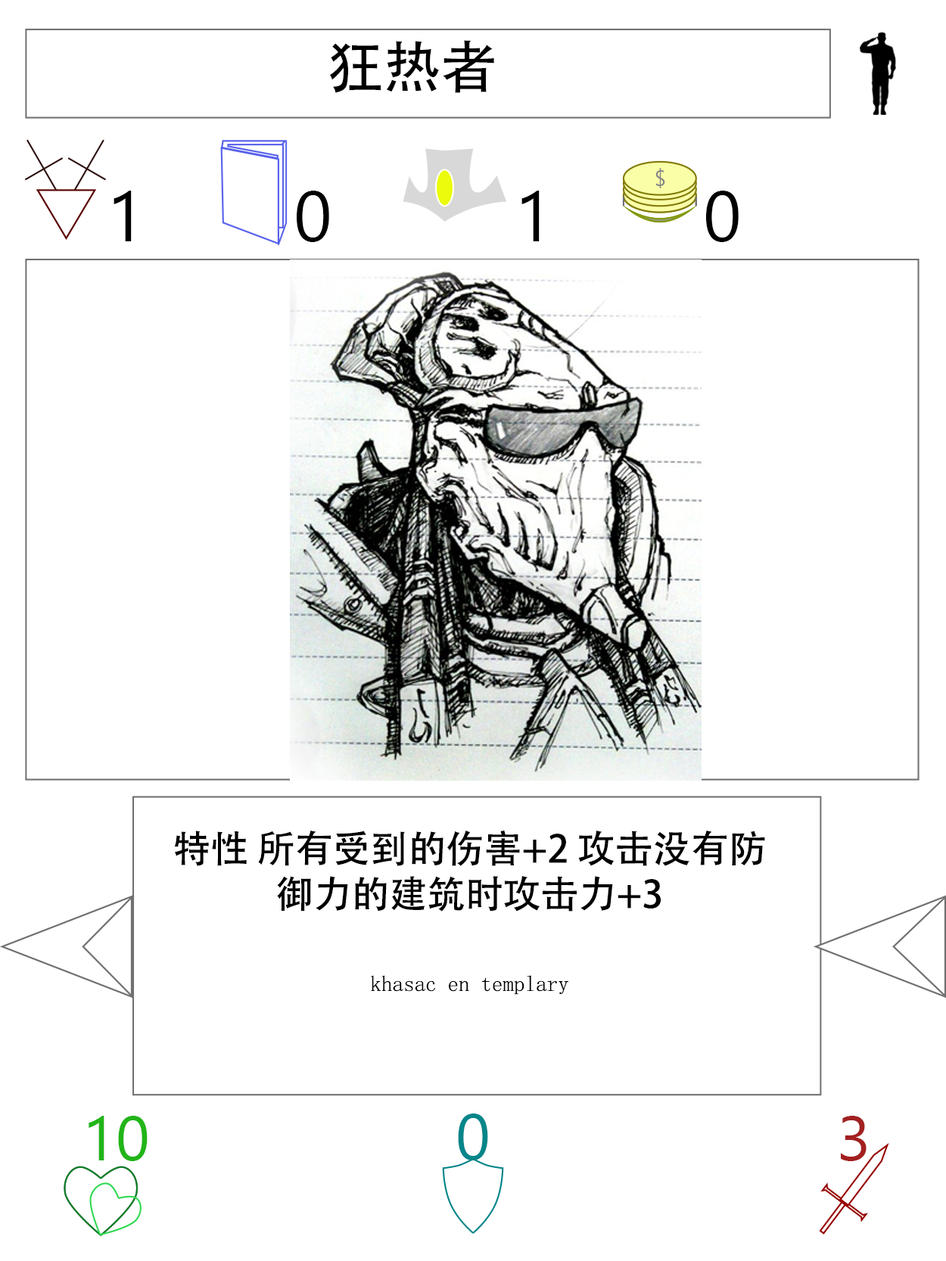
<style>
.page{position:relative;width:946px;height:1261px;background:#ffffff}
.page>*{position:absolute;margin:0}
.t1{font:56.7px "AdobeHeitiStd-Regular";color:#000000}
.t2{font:70.9px "SegoeUI";color:#000000}
.t3{font:37.8px "AdobeHeitiStd-Regular";color:#000000}
.t4{font:22.1px "NSimSun";color:#000000}
.t5{font:63px "SegoeUI";color:#22b518}
.t6{font:64.6px "SegoeUI";color:#05868a}
.t7{font:63px "SegoeUI";color:#a32020}
</style>
<div class="page">
<p class="t1" style="left:330px;top:40px;width:164px;height:53px">狂热者</p>
<p class="t2" style="left:113px;top:191px;width:19px;height:50px">1</p>
<p class="t2" style="left:297px;top:191px;width:32px;height:51px">0</p>
<p class="t2" style="left:521px;top:191px;width:18px;height:50px">1</p>
<p class="t2" style="left:706px;top:191px;width:32px;height:51px">0</p>
<p class="t3" style="left:174px;top:831px;width:591px;height:164px;text-align:center">特性 所有受到的伤害+2 攻击没有防御力的建筑时攻击力+3<br><br><span class="t4">khasac en templary</span></p>
<p class="t5" style="left:89px;top:1116px;width:59px;height:45px">10</p>
<p class="t6" style="left:458px;top:1114px;width:30px;height:46px">0</p>
<p class="t7" style="left:840px;top:1116px;width:26px;height:45px">3</p>
</div>
